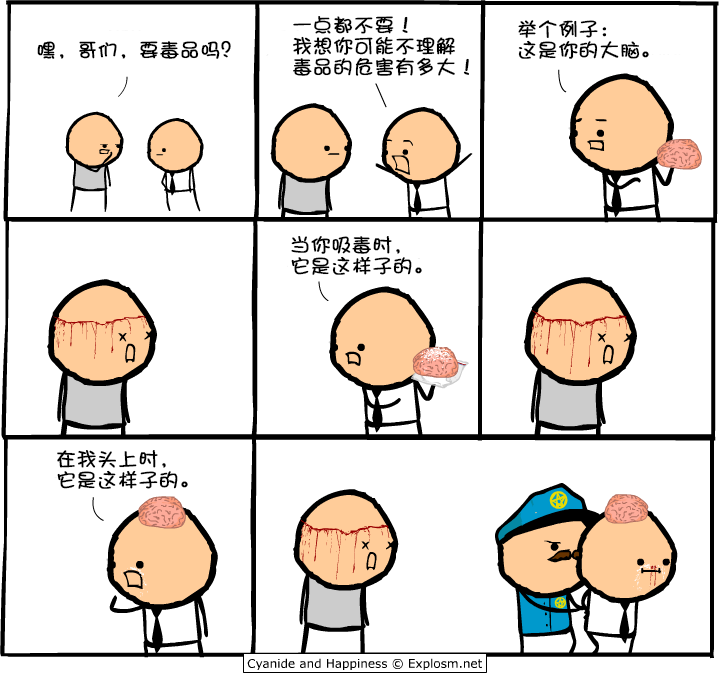
<style>
.page{position:relative;width:720px;height:675px;background:#ffffff}
.page>*{position:absolute;margin:0}
.t1{font:20px/21px "DFPShaoNvW5";color:#000000;font-weight:bold}
.t2{font:20px "DFPShaoNvW5";color:#000000;font-weight:bold}
</style>
<div class="page">
<p class="t1" style="left:293px;top:16px;width:176px;height:60px">一点都不要！<br>我想你可能不理解<br>毒品的危害有多大！</p>
<p class="t1" style="left:518px;top:20px;width:131px;height:39px">举个例子：<br>这是你的大脑。</p>
<p class="t2" style="left:37px;top:40px;width:194px;height:19px">嘿，哥们，要毒品吗？</p>
<p class="t1" style="left:291px;top:236px;width:131px;height:39px">当你吸毒时，<br>它是这样子的。</p>
<p class="t1" style="left:57px;top:450px;width:131px;height:39px">在我头上时，<br>它是这样子的。</p>
</div>
